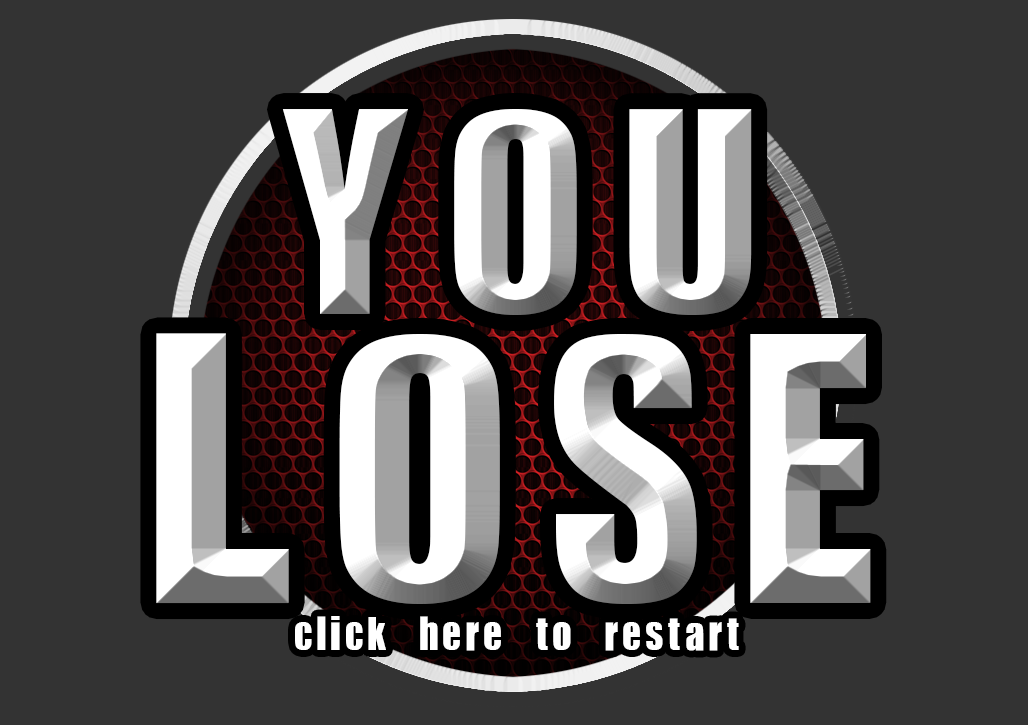
<style>
.page{position:relative;width:1028px;height:725px;background:#333333}
.page>*{position:absolute;margin:0}
.t1{font:305px "JCHEadA";letter-spacing:0.1em}
.t2{font:400.5px "JCHEadA";letter-spacing:0.075em}
.t3{font:50px "JCHEadA";letter-spacing:0.075em;color:#ffffff}
</style>
<div class="page">
<p class="t1" style="left:282px;top:109px;width:470px;height:206px">YOU</p>
<p class="t2" style="left:156px;top:333px;width:715px;height:271px">LOSE</p>
<p class="t3" style="left:295px;top:616px;width:444px;height:35px">click here to restart</p>
</div>
